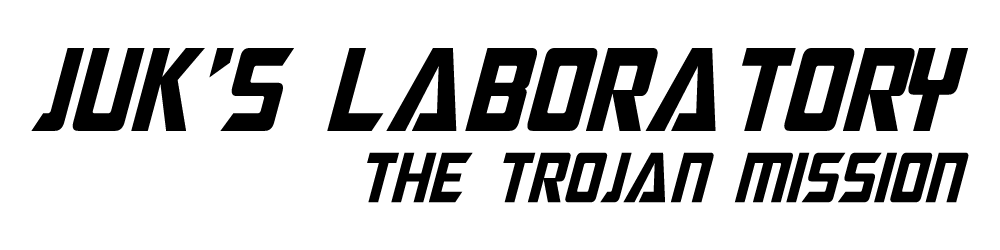
<style>
.page{position:relative;width:1000px;height:250px;background:#ffffff}
.page>*{position:absolute;margin:0}
.t1{font:118.8px "MegatronCondensed-Italic";color:#000000}
.t2{font:71.3px "MegatronCondensed-Italic";color:#000000}
</style>
<div class="page">
<p class="t1" style="left:31px;top:48px;width:937px;height:83px">JUk’S LABOratory</p>
<p class="t2" style="left:367px;top:152px;width:602px;height:51px">the trojan mission</p>
</div>
